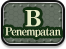
<style>
.page{position:relative;width:66px;height:49px}
.page>*{position:absolute;margin:0}
.t1{font:11px/9px "RyuminPro-ExBold";letter-spacing:-0.08em;color:#eaedc8}
.t2{font:22px/9px "RyuminPro-ExHeavy";letter-spacing:-0.08em;color:#eaedc8}
</style>
<div class="page">
<p class="t1" style="left:5px;top:10px;width:56px;height:27px;text-align:center"><span class="t2">B<br></span>Penempatan</p>
</div>
